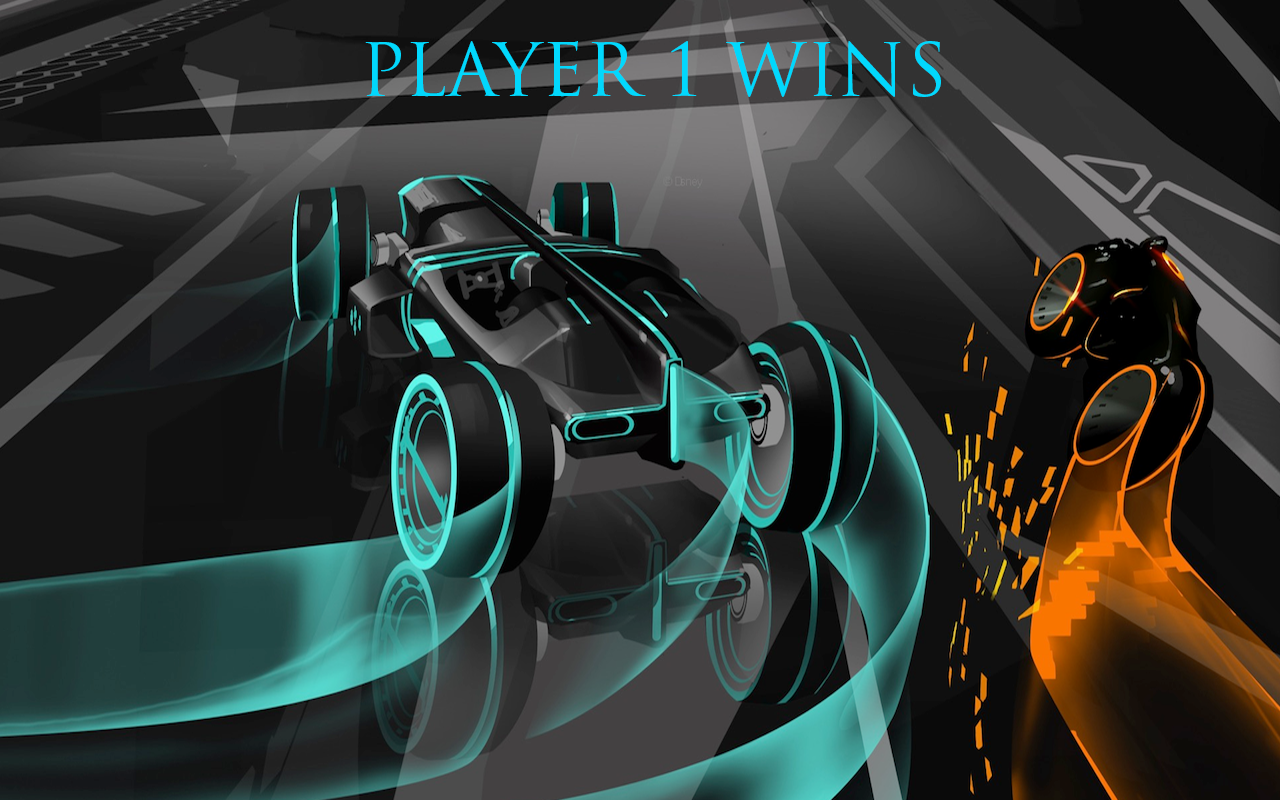
<style>
.page{position:relative;width:1280px;height:800px}
.page>*{position:absolute;margin:0}
.t1{font:72px "TrajanPro-Regular";color:#01d8fd}
</style>
<div class="page">
<p class="t1" style="left:365px;top:41px;width:576px;height:56px">PLAYER 1 WINS</p>
</div>
